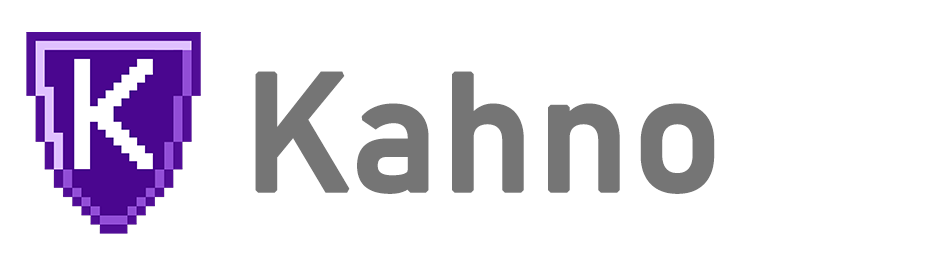
<style>
.page{position:relative;width:938px;height:266px;background:#ffffff}
.page>*{position:absolute;margin:0}
.t1{font:163px "Bahnschrift";color:#757575;font-weight:bold}
</style>
<div class="page">
<p class="t1" style="left:255px;top:71px;width:460px;height:123px">Kahno</p>
</div>
